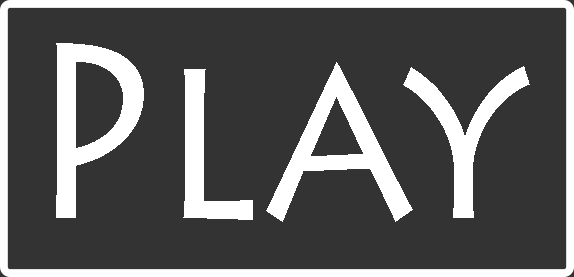
<style>
.page{position:relative;width:574px;height:277px;background:#333333}
.page>*{position:absolute;margin:0}
.t1{font:250.9px "LithosPro-Regular";color:#ffffff;scale:0.86 1}
</style>
<div class="page">
<p class="t1" style="left:56px;top:43px;width:474px;height:179px">Play</p>
</div>
